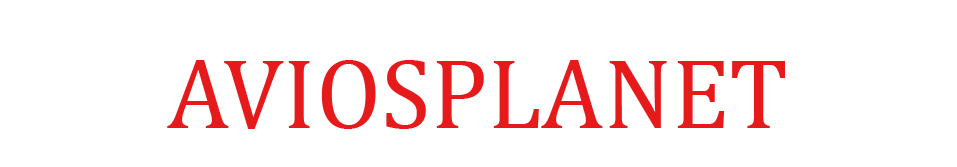
<style>
.page{position:relative;width:957px;height:167px;background:#ffffff}
.page>*{position:absolute;margin:0}
.t1{font:100px "CambriaMath";color:#e61a1a}
</style>
<div class="page">
<p class="t1" style="left:167px;top:60px;width:618px;height:69px">AVIOSPLANET</p>
</div>
